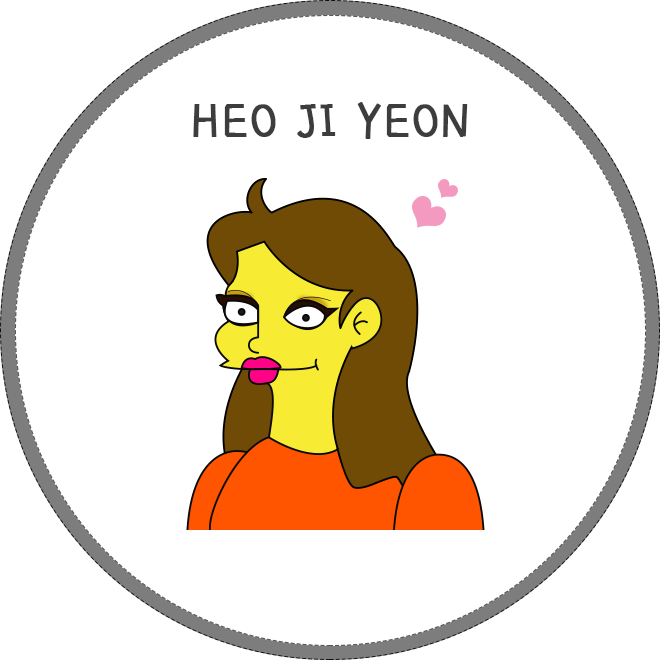
<style>
.page{position:relative;width:660px;height:660px;background:#ffffff}
.page>*{position:absolute;margin:0}
.t1{font:50px "Goyang";letter-spacing:0.05em;color:#3d3d3d;font-weight:bold}
</style>
<div class="page">
<p class="t1" style="left:193px;top:102px;width:275px;height:37px">HEO JI YEON</p>
</div>
